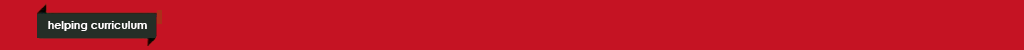
<style>
.page{position:relative;width:1024px;height:50px;background:#c51323}
.page>*{position:absolute;margin:0}
.t1{font:11px "CenturyGothic-Bold";color:#fffefe}
</style>
<div class="page">
<p class="t1" style="left:48px;top:21px;width:99px;height:10px">helping curriculum</p>
</div>
